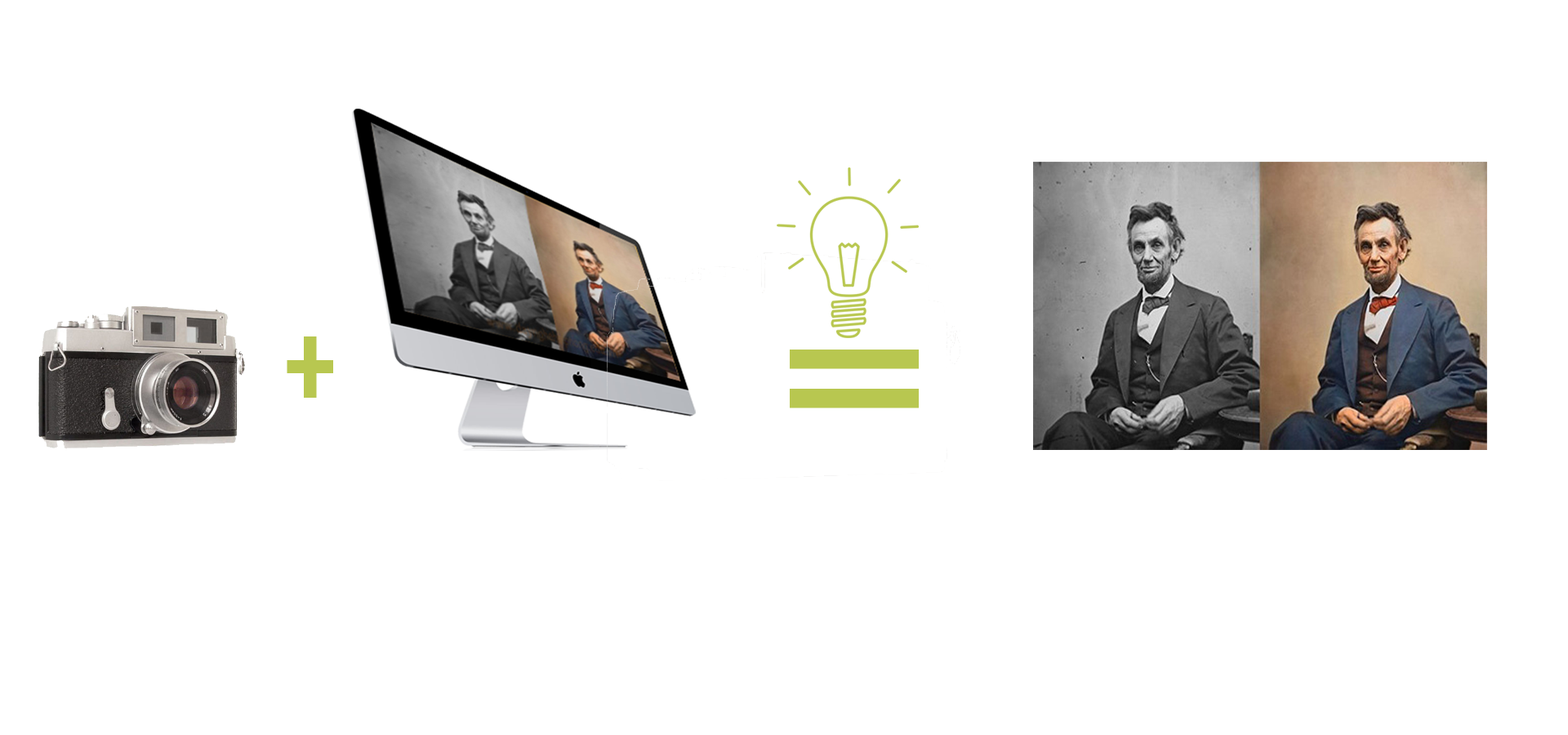
<style>
.page{position:relative;width:1568px;height:735px;background:#ffffff}
.page>*{position:absolute;margin:0}
.t1{font:122.5px "PoplarStd";color:#b8c750}
.t2{font:178.7px "PoplarStd";color:#b8c750;scale:1.92 1}
</style>
<div class="page">
<p class="t1" style="left:287px;top:336px;width:46px;height:62px">+</p>
<p class="t2" style="left:790px;top:350px;width:129px;height:58px">=</p>
</div>
